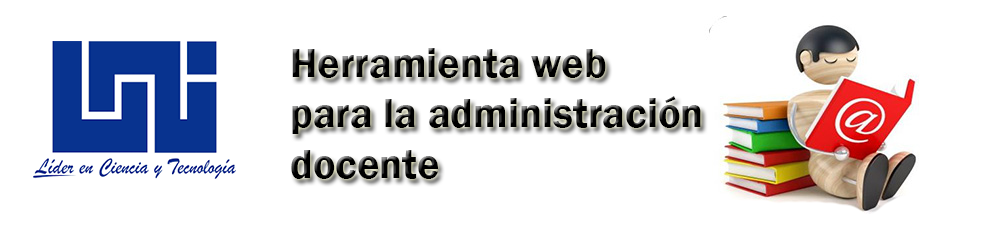
<style>
.page{position:relative;width:1000px;height:250px;background:#ffffff}
.page>*{position:absolute;margin:0}
.t1{font:42px "FranklinGothic-Demi";color:#000000}
</style>
<div class="page">
<p class="t1" style="left:291px;top:48px;width:410px;height:131px">Herramienta web <br>para la administración<br>docente</p>
</div>
